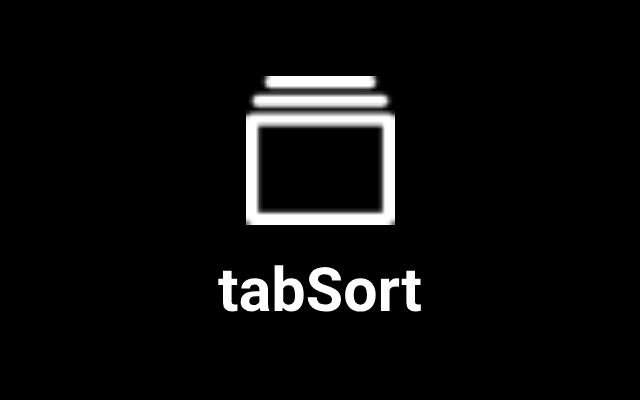
<style>
.page{position:relative;width:640px;height:400px;background:#000000}
.page>*{position:absolute;margin:0}
.t1{font:61px "Roboto-Bold";color:#ffffff}
</style>
<div class="page">
<p class="t1" style="left:218px;top:265px;width:203px;height:47px">tabSort</p>
</div>
